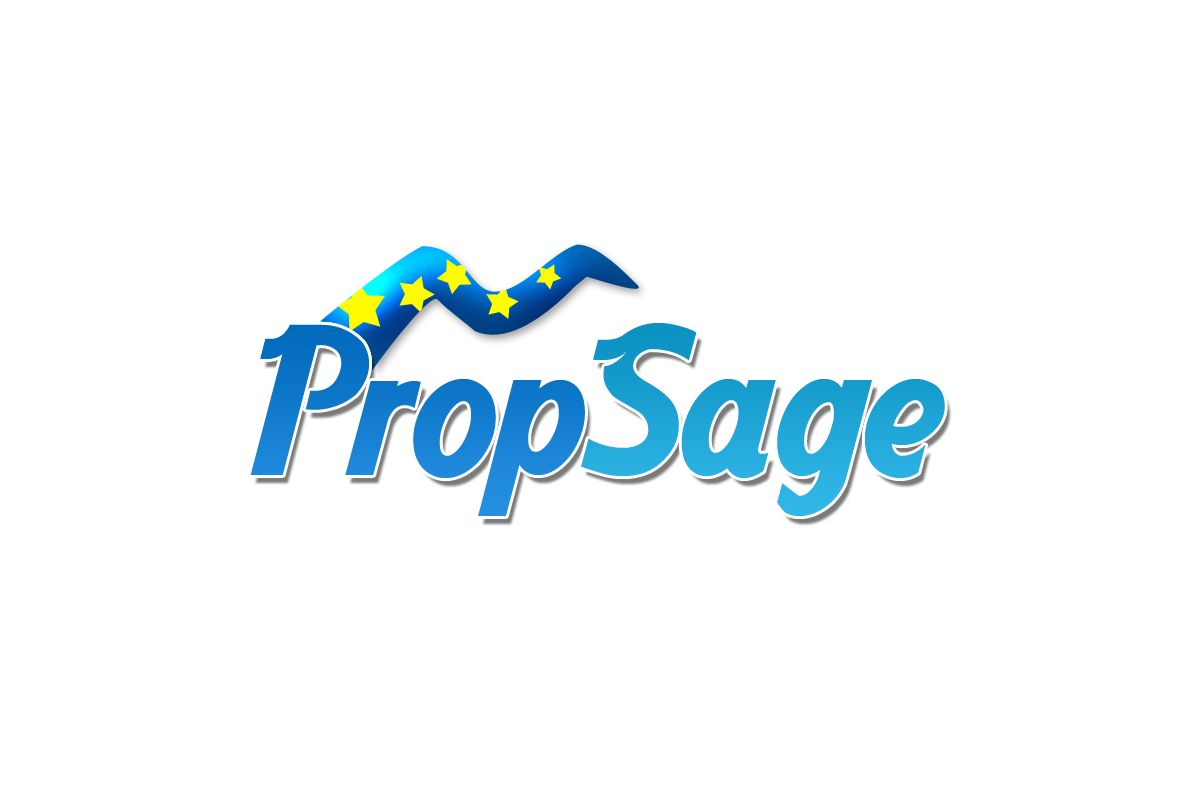
<style>
.page{position:relative;width:1200px;height:800px;background:#ffffff}
.page>*{position:absolute;margin:0}
.t1{font:200px "AardvarkCafe"}
</style>
<div class="page">
<p class="t1" style="left:250px;top:322px;width:695px;height:194px">PropSage</p>
</div>
